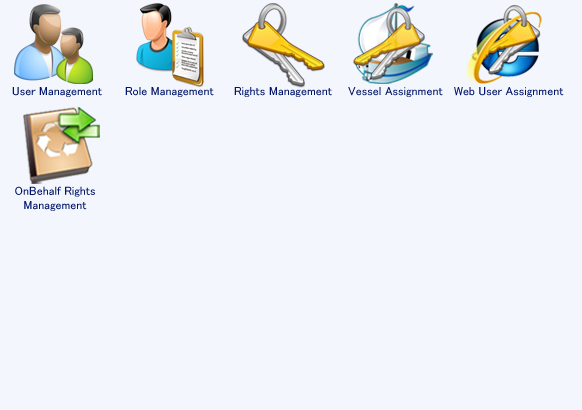
<style>
.page{position:relative;width:582px;height:410px;background:#f3f6fd}
.page>*{position:absolute;margin:0}
.t1{font:12px "MS-PGothic";color:#021669}
</style>
<div class="page">
<p class="t1" style="left:12px;top:87px;width:90px;height:10px">User Management</p>
<p class="t1" style="left:125px;top:87px;width:89px;height:10px">Role Management</p>
<p class="t1" style="left:234px;top:87px;width:98px;height:10px">Rights Management</p>
<p class="t1" style="left:348px;top:87px;width:95px;height:10px">Vessel Assignment</p>
<p class="t1" style="left:454px;top:87px;width:110px;height:10px">Web User Assignment</p>
<p class="t1" style="left:15px;top:186px;width:80px;height:25px;text-align:center">OnBehalf Rights<br>Management</p>
</div>
